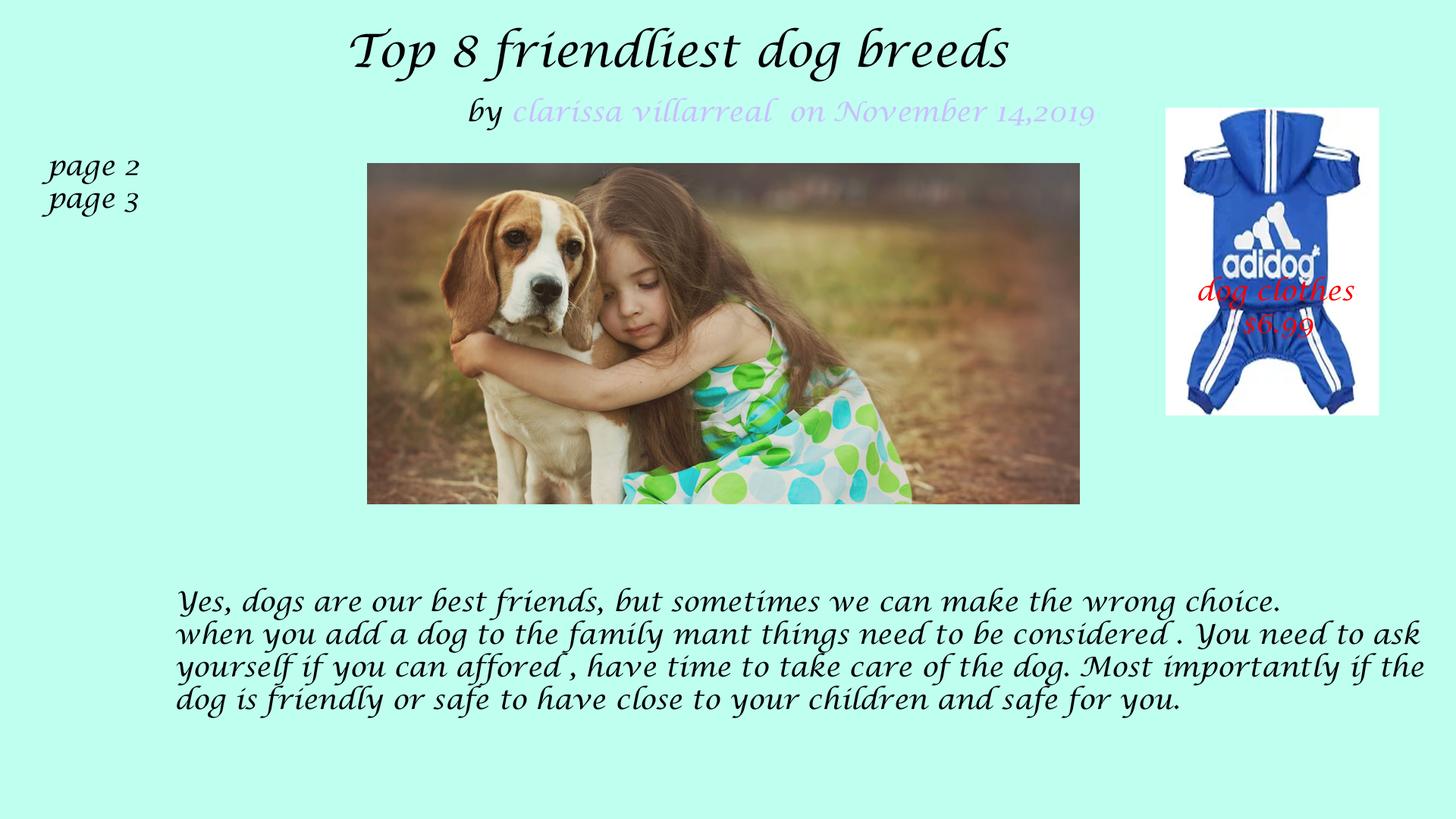
<style>
.page{position:relative;width:1456px;height:819px;background:#befff0}
.page>*{position:absolute;margin:0}
.t1{font:27.3px "LucidaCalligraphy-Italic";color:#cabeff}
.t2{font:45.5px "LucidaCalligraphy-Italic";color:#000000}
.t3{font:27.3px "LucidaCalligraphy-Italic";color:#000000}
.t4{font:27.3px "LucidaCalligraphy-Italic";color:#f90000}
</style>
<div class="page">
<p class="t1" style="left:350px;top:27px;width:744px;height:103px"><span class="t2">Top 8 friendliest dog breeds <br>        </span><span class="t3">by </span>clarissa villarreal  on November 14,2019</p>
<p class="t3" style="left:41px;top:160px;width:99px;height:57px">page 2<br>page 3</p>
<p class="t4" style="left:1198px;top:277px;width:156px;height:60px">dog clothes <br>     $6.99</p>
<p class="t3" style="left:175px;top:588px;width:1248px;height:130px">Yes, dogs are our best friends, but sometimes we can make the wrong choice. <br>when you add a dog to the family mant things need to be considered . You need to ask <br>yourself if you can affored , have time to take care of the dog. Most importantly if the <br>dog is friendly or safe to have close to your children and safe for you.</p>
</div>
